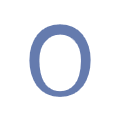
<style>
.page{position:relative;width:120px;height:120px;background:#ffffff}
.page>*{position:absolute;margin:0}
.t1{font:160px "Buda";color:#657bae}
</style>
<div class="page">
<p class="t1" style="left:30px;top:25px;width:60px;height:71px">o</p>
</div>
